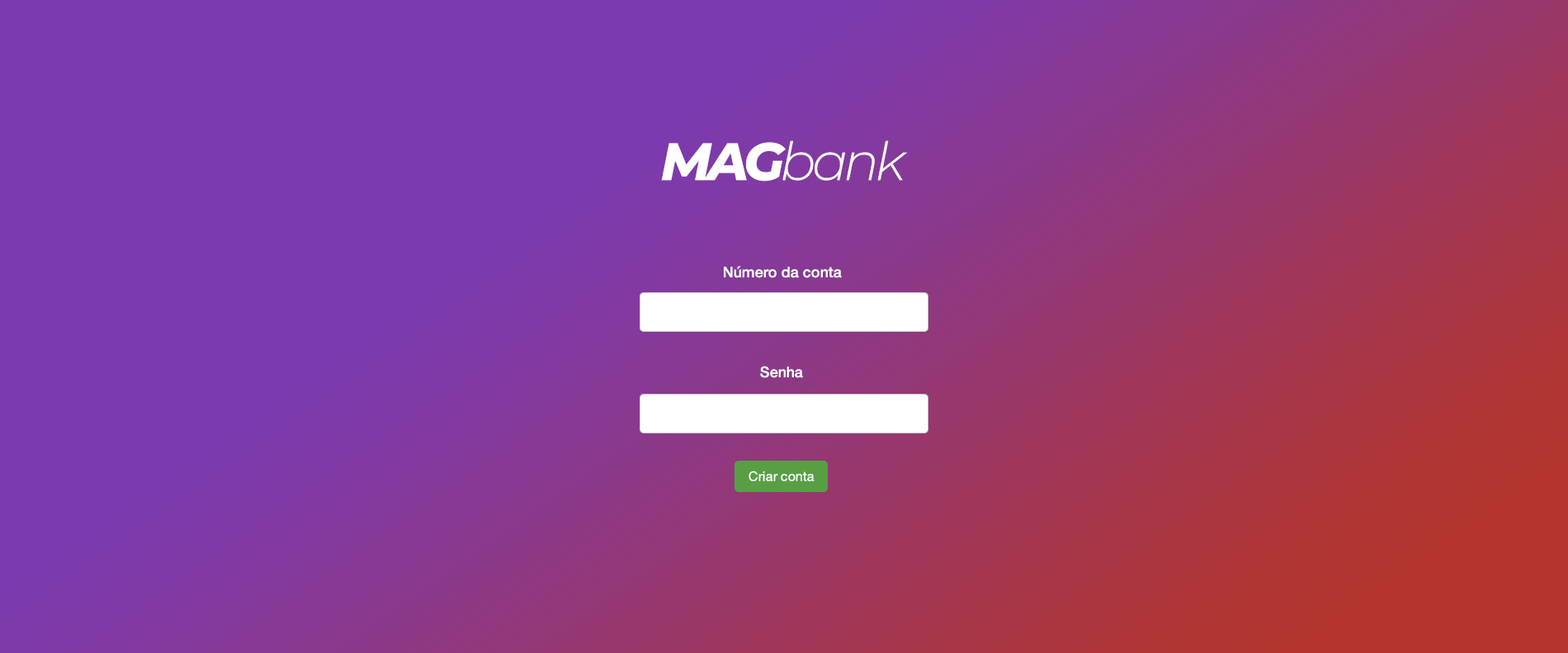
<style>
.page{position:relative;width:1568px;height:653px;background:#7c3ab1}
.page>*{position:absolute;margin:0}
.t1{font:52.9px "Montserrat-LightItalic";letter-spacing:-0.075em;color:#ffffff}
.t2{font:52.9px "Montserrat-ExtraBoldItalic";letter-spacing:-0.075em;color:#ffffff}
.t3{font:14.9px "HelveticaNeue-Medium";color:#ffffff}
.t4{font:13.2px "HelveticaNeue";color:#ffffff}
</style>
<div class="page">
<p class="t1" style="left:661px;top:140px;width:247px;height:42px"><span class="t2">MAG</span>bank</p>
<p class="t3" style="left:724px;top:266px;width:118px;height:12px">Número da conta</p>
<p class="t3" style="left:760px;top:366px;width:43px;height:12px">Senha</p>
<p class="t4" style="left:749px;top:470px;width:66px;height:11px">Criar conta</p>
</div>
